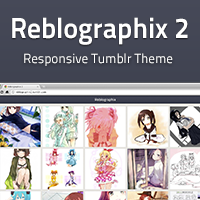
<style>
.page{position:relative;width:200px;height:200px}
.page>*{position:absolute;margin:0}
.t1{font:28.7px "TitilliumText25L-800wt";color:#ffffff;scale:0.96 1}
.t2{font:13.2px "TitilliumText25L-400wt";color:#ffffff}
</style>
<div class="page">
<p class="t1" style="left:12px;top:17px;width:176px;height:28px">Reblographix 2</p>
<p class="t2" style="left:24px;top:53px;width:149px;height:13px">Responsive Tumblr Theme</p>
</div>
